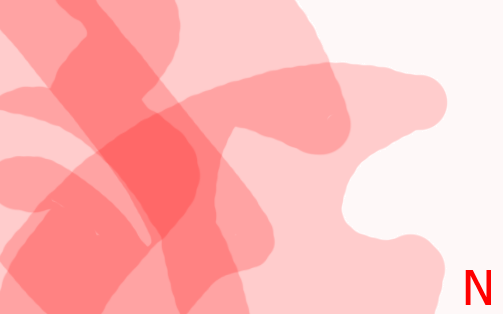
<style>
.page{position:relative;width:503px;height:314px;background:#ffcccc}
.page>*{position:absolute;margin:0}
.t1{font:48px "Tahoma";color:#ff0000}
</style>
<div class="page">
<p class="t1" style="left:465px;top:270px;width:26px;height:35px">N</p>
</div>
